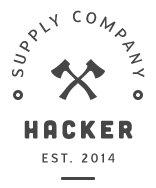
<style>
.page{position:relative;width:156px;height:188px;background:#ffffff}
.page>*{position:absolute;margin:0}
.t1{font:23px "Glametrix";letter-spacing:0.15em;color:#464646;text-transform:uppercase}
.t2{font:23px "Glametrix";letter-spacing:-0.05em;color:#464646;text-transform:uppercase}
.t3{font:25px "Cubano-Regular";letter-spacing:0.17em;color:#464646;text-transform:uppercase}
.t4{font:18px "Glametrix";letter-spacing:0.17em;color:#464646;text-transform:uppercase}
</style>
<div class="page">
<p class="t1" style="left:12px;top:10px;width:133px;height:68px;text-align:center"><span class="t2"> </span>supply company</p>
<p class="t3" style="left:24px;top:120px;width:109px;height:19px">HACKER</p>
<p class="t4" style="left:42px;top:153px;width:73px;height:10px">EST. 2014</p>
</div>
